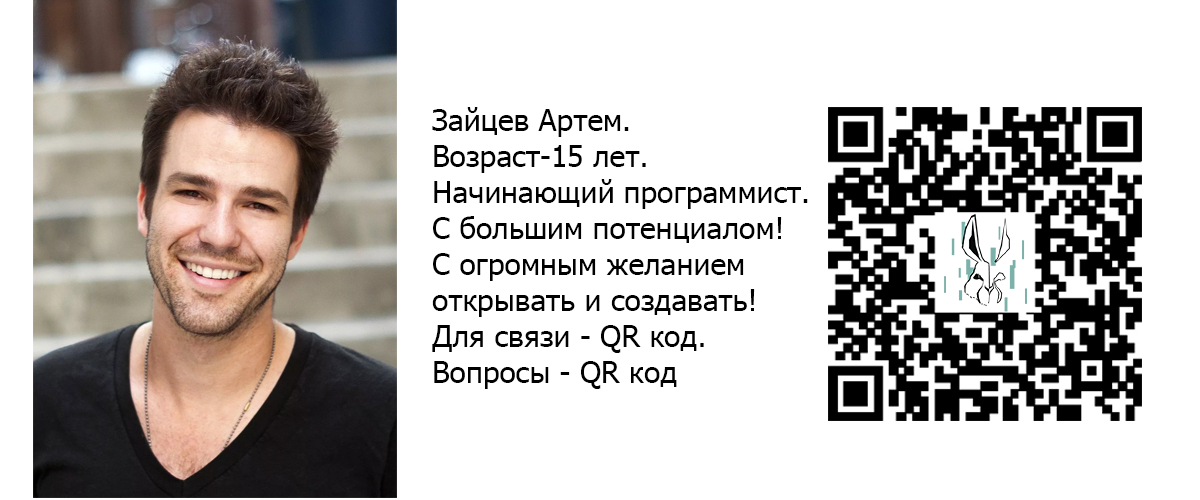
<style>
.page{position:relative;width:1200px;height:500px;background:#ffffff}
.page>*{position:absolute;margin:0}
.t1{font:30px "Tahoma";color:#000000}
</style>
<div class="page">
<p class="t1" style="left:432px;top:107px;width:376px;height:282px;text-align:right">Зайцев Артем.<br>Возраст-15 лет.<br>Начинающий программист.<br>С большим потенциалом!<br>С огромным желанием <br>открывать и создавать!<br>Для связи - QR код.<br>Вопросы - QR код</p>
</div>
